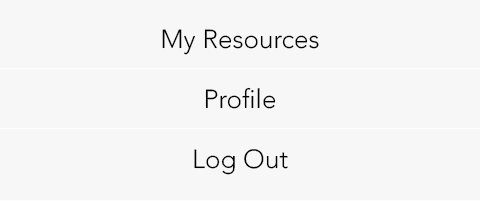
<style>
.page{position:relative;width:480px;height:201px;background:#f7f7f7}
.page>*{position:absolute;margin:0}
.t1{font:26px/60px "AvenirLTStd-Light";color:#000000}
</style>
<div class="page">
<p class="t1" style="left:162px;top:29px;width:157px;height:146px;text-align:center">My Resources<br>Profile<br>Log Out</p>
</div>
